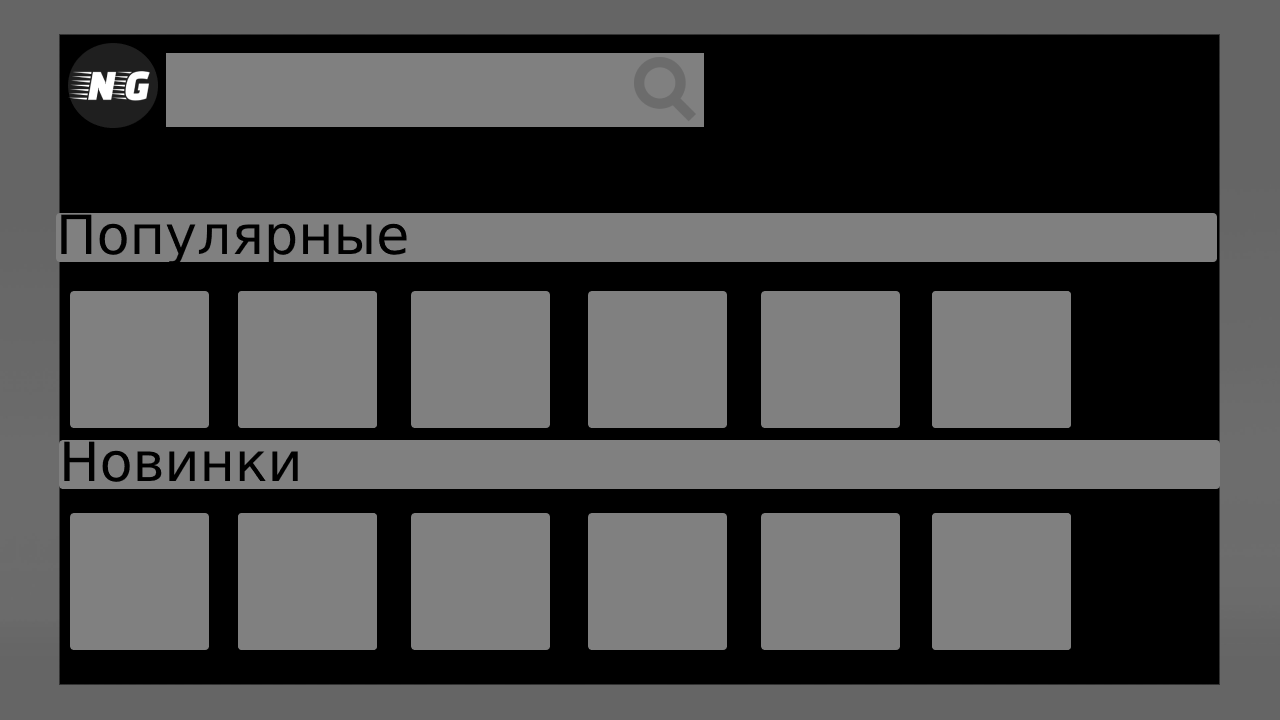
<style>
.page{position:relative;width:1280px;height:720px;background:#000000}
.page>*{position:absolute;margin:0}
.t1{font:54px "DejaVuSans";color:#000000}
</style>
<div class="page">
<p class="t1" style="left:61px;top:214px;width:346px;height:52px">Популярные</p>
<p class="t1" style="left:64px;top:441px;width:234px;height:41px">Новинки</p>
</div>
